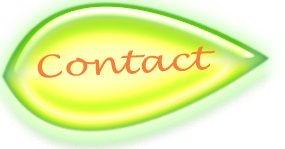
<style>
.page{position:relative;width:285px;height:149px}
.page>*{position:absolute;margin:0}
.t1{font:31.2px "LucidaHandwriting-Italic";color:#f57f37;scale:1.25 1}
</style>
<div class="page">
<p class="t1" style="left:37px;top:46px;width:178px;height:32px;rotate:-3deg">Contact</p>
</div>
